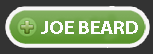
<style>
.page{position:relative;width:153px;height:54px;background:#333333}
.page>*{position:absolute;margin:0}
.t1{font:19.4px "MyriadPro-Bold";letter-spacing:-0.05em;color:#fdfdfd;text-transform:uppercase;scale:1.1 1}
</style>
<div class="page">
<p class="t1" style="left:41px;top:21px;width:97px;height:13px">joe Beard</p>
</div>
